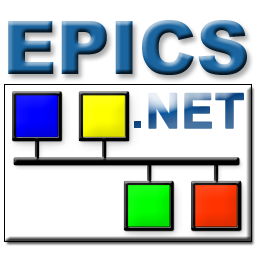
<style>
.page{position:relative;width:256px;height:256px;background:#ffffff}
.page>*{position:absolute;margin:0}
.t1{font:74px "Arial-Black"}
</style>
<div class="page">
<p class="t1" style="left:8px;top:20px;width:239px;height:55px">EPICS</p>
</div>
